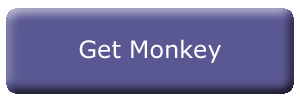
<style>
.page{position:relative;width:300px;height:100px;background:#5a5892}
.page>*{position:absolute;margin:0}
.t1{font:24px "Verdana";color:#ffffff}
</style>
<div class="page">
<p class="t1" style="left:79px;top:39px;width:142px;height:24px">Get Monkey</p>
</div>
